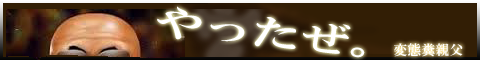
<style>
.page{position:relative;width:480px;height:60px;background:#321e05}
.page>*{position:absolute;margin:0}
.t1{font:35.3px "HGMinchoE";color:#ffffff;scale:1.39 1}
.t2{font:14px "HGMinchoE";color:#ffffff}
</style>
<div class="page">
<p class="t1" style="left:157px;top:6px;width:208px;height:52px;rotate:6deg">やったぜ。</p>
<p class="t2" style="left:394px;top:43px;width:69px;height:14px">変態糞親父</p>
</div>
